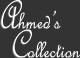
<style>
.page{position:relative;width:80px;height:58px;background:#333333}
.page>*{position:absolute;margin:0}
.t1{font:27.2px/29px "FrenchScriptMT";color:#fefefe;font-style:italic;scale:0.86 1}
.t2{font:42.7px/29px "FrenchScriptMT";color:#fefefe;font-style:italic;scale:0.86 1}
</style>
<div class="page">
<p class="t1" style="left:0px;top:0px;width:80px;height:58px;text-align:center"><span class="t2">A</span>hmed’s <br><span class="t2">  C</span>ollection</p>
</div>
